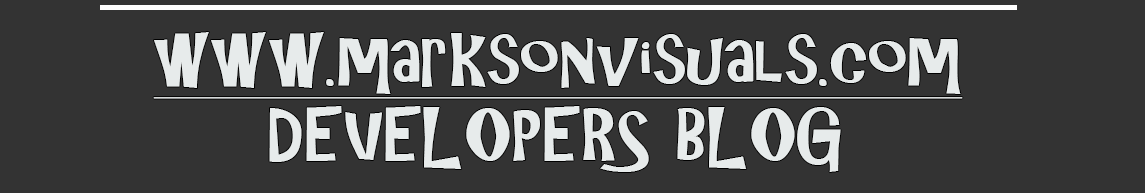
<style>
.page{position:relative;width:1145px;height:193px;background:#333333}
.page>*{position:absolute;margin:0}
.t1{font:66.7px/75px "ARCHRISTY";color:#e7ebeb;text-decoration:underline;scale:1.13 1}
.t2{font:66.7px/75px "ARCHRISTY";color:#e7ebeb;scale:1.13 1}
</style>
<div class="page">
<p class="t1" style="left:153px;top:32px;width:810px;height:140px;text-align:center">www.marksonvisuals.com<br><span class="t2">DEVELOPERS BLOG</span></p>
</div>
